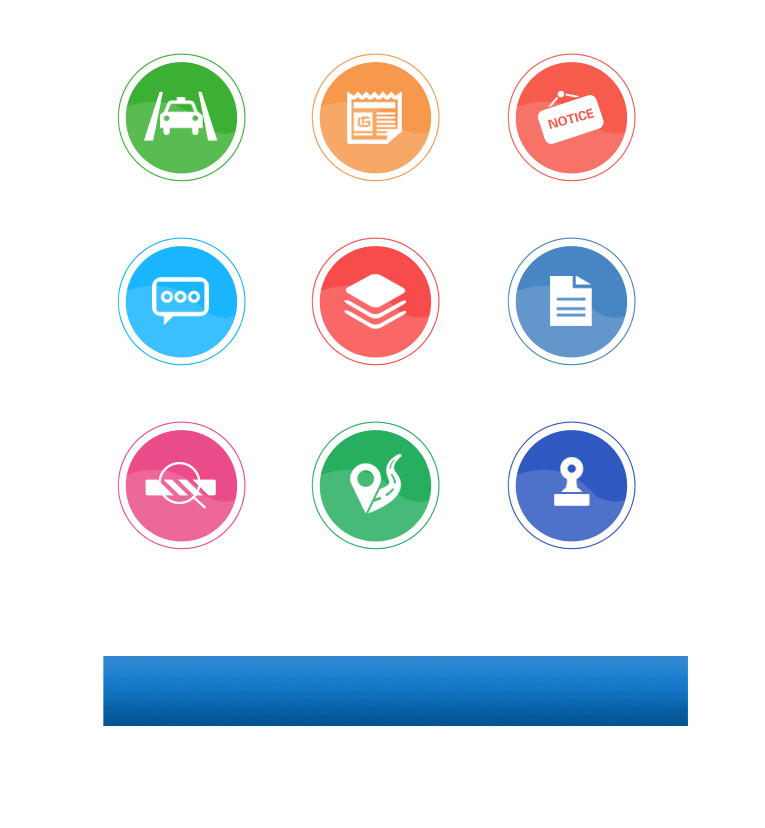
<style>
.page{position:relative;width:765px;height:828px;background:#ffffff}
.page>*{position:absolute;margin:0}
.t1{font:12.7px "FZDHTJW--GB1-0";color:#f75b4c}
</style>
<div class="page">
<p class="t1" style="left:548px;top:108px;width:47px;height:21px;rotate:-15deg">NOTICE</p>
</div>
